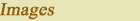
<style>
.page{position:relative;width:140px;height:21px;background:#e6e6b8}
.page>*{position:absolute;margin:0}
.t1{font:18px "TimesNewRomanPSMT";color:#915c07;font-weight:bold;font-style:italic}
</style>
<div class="page">
<p class="t1" style="left:0px;top:3px;width:55px;height:17px">Images</p>
</div>
